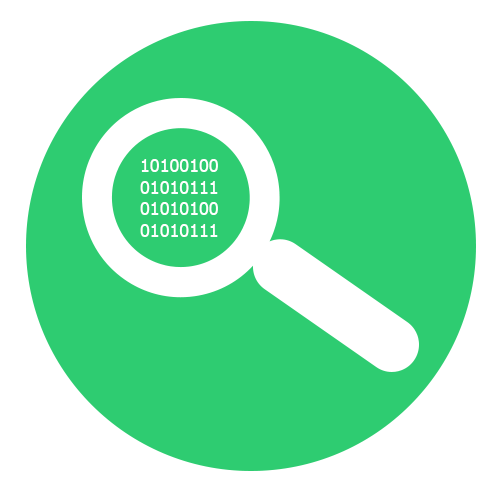
<style>
.page{position:relative;width:500px;height:500px;background:#2ecc71}
.page>*{position:absolute;margin:0}
.t1{font:18px "Tahoma";color:#ffffff}
</style>
<div class="page">
<p class="t1" style="left:140px;top:159px;width:78px;height:78px">10100100<br>01010111<br>01010100<br>01010111</p>
</div>
